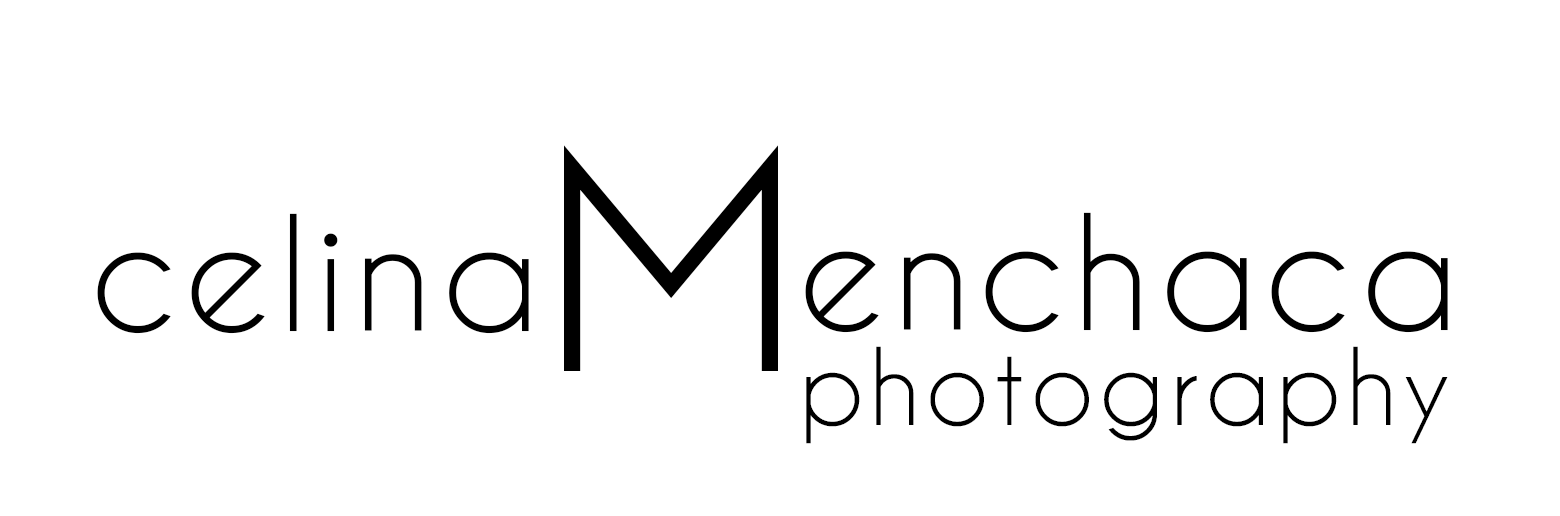
<style>
.page{position:relative;width:1560px;height:516px;background:#ffffff}
.page>*{position:absolute;margin:0}
.t1{font:300px "BonvenoCF-Light";letter-spacing:0.05em;color:#000000}
.t2{font:150px "CaviarDreams";letter-spacing:0.05em;color:#000000}
.t3{font:100px "CaviarDreams";letter-spacing:0.05em;color:#000000}
</style>
<div class="page">
<p class="t1" style="left:564px;top:145px;width:214px;height:226px">M</p>
<p class="t2" style="left:97px;top:213px;width:432px;height:121px">celina</p>
<p class="t2" style="left:805px;top:212px;width:643px;height:121px">enchaca</p>
<p class="t3" style="left:806px;top:346px;width:642px;height:98px">photography</p>
</div>
